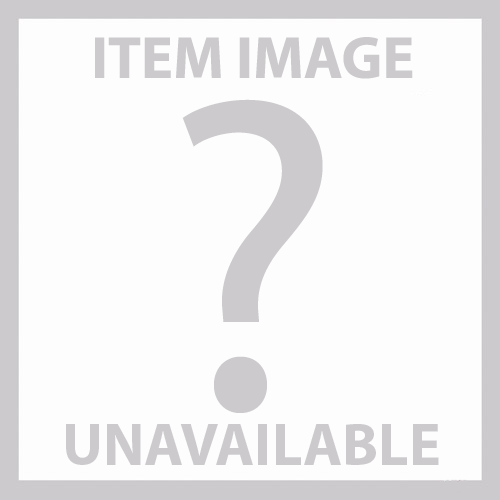
<style>
.page{position:relative;width:500px;height:500px;background:#fdfdfd}
.page>*{position:absolute;margin:0}
.t1{font:60px "MyriadPro-Bold";color:#cccacd}
.t2{font:450px "MyriadPro-Regular";color:#cccacd}
</style>
<div class="page">
<p class="t1" style="left:95px;top:37px;width:318px;height:42px">ITEM IMAGE</p>
<p class="t2" style="left:182px;top:99px;width:141px;height:314px">?</p>
<p class="t1" style="left:66px;top:424px;width:373px;height:41px">UNAVAILABLE</p>
</div>
